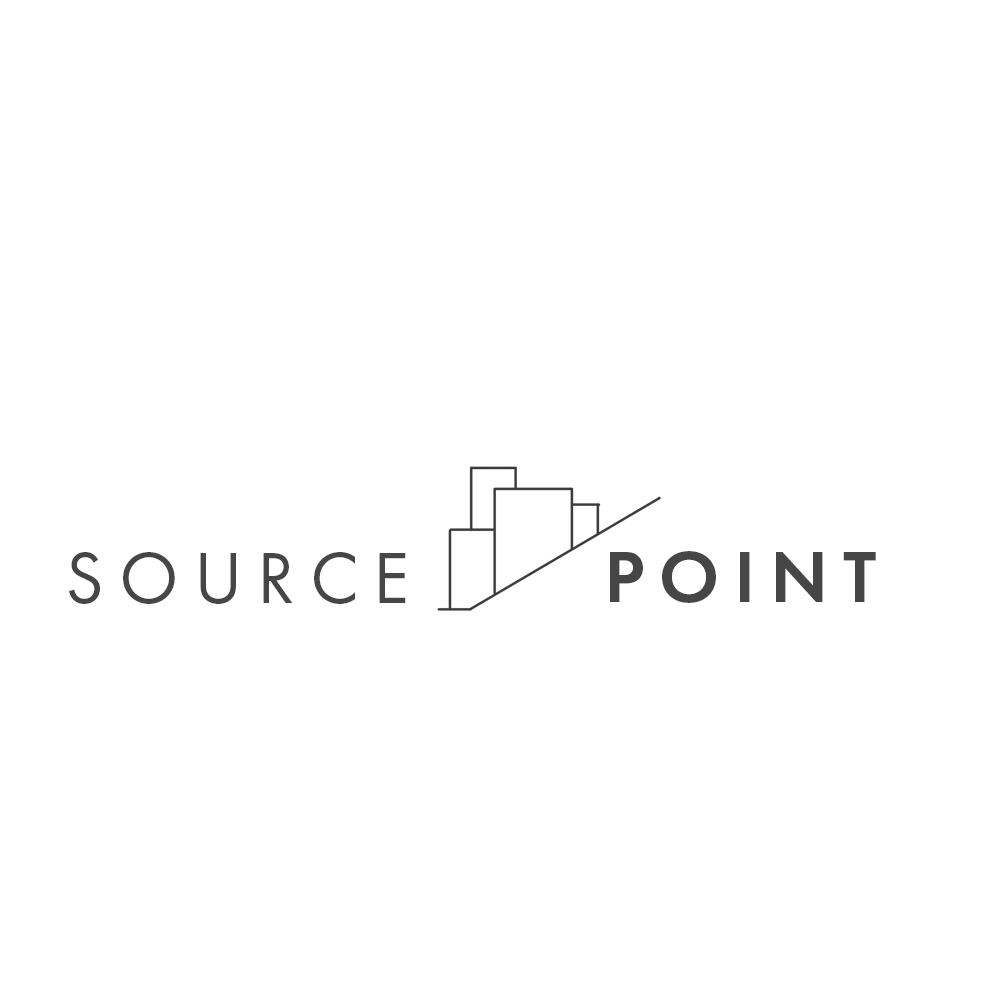
<style>
.page{position:relative;width:1000px;height:1000px;background:#ffffff}
.page>*{position:absolute;margin:0}
.t1{font:75px "FuturaPT-Book";letter-spacing:0.2em;color:#464646}
.t2{font:75px "FuturaPT-Demi";letter-spacing:0.2em;color:#464646}
</style>
<div class="page">
<p class="t1" style="left:69px;top:552px;width:337px;height:52px">SOURCE</p>
<p class="t2" style="left:610px;top:551px;width:266px;height:52px">POINT</p>
</div>
